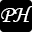
<style>
.page{position:relative;width:32px;height:32px;background:#000000}
.page>*{position:absolute;margin:0}
.t1{font:24px "MonotypeCorsiva";color:#ffffff}
</style>
<div class="page">
<p class="t1" style="left:1px;top:6px;width:33px;height:16px">PH</p>
</div>
